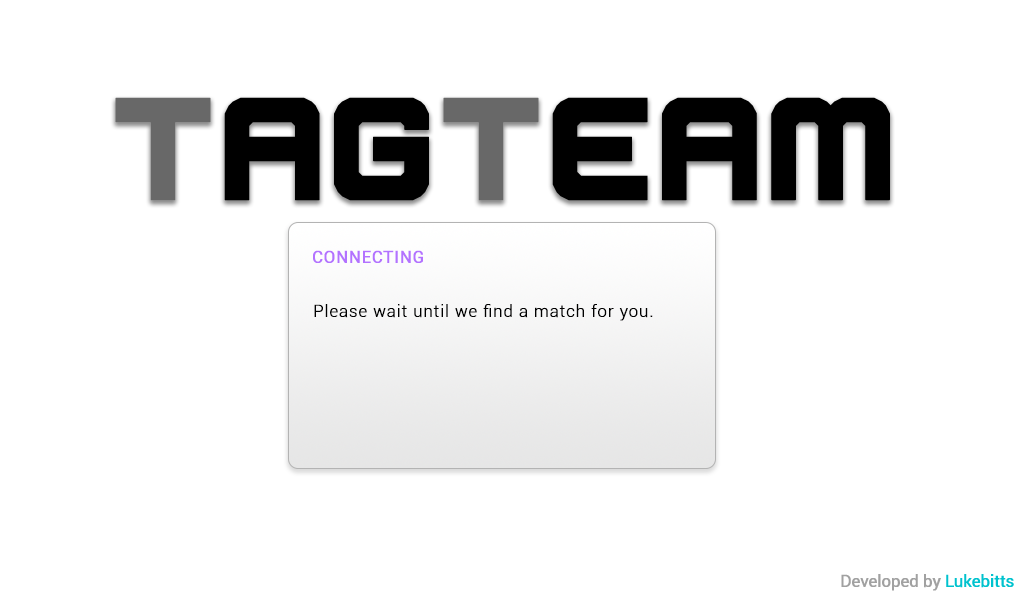
<style>
.page{position:relative;width:1024px;height:600px;background:#ffffff}
.page>*{position:absolute;margin:0}
.t1{font:125px "Scorpion";letter-spacing:0.035em;color:#000000;font-weight:bold}
.t2{font:125px "Scorpion";letter-spacing:0.035em;color:#686868;font-weight:bold}
.t3{font:16.7px "Roboto-Regular";letter-spacing:0.035em;color:#b372ff;font-weight:bold}
.t4{font:16.7px "Roboto-Light";letter-spacing:0.035em;color:#000000;font-weight:bold}
.t5{font:16.7px "Roboto-Regular";letter-spacing:-0.025em;color:#a1a1a1;font-weight:bold}
.t6{font:16.7px "Roboto-Regular";letter-spacing:-0.025em;color:#00c2ce;font-weight:bold}
</style>
<div class="page">
<p class="t1" style="left:115px;top:97px;width:775px;height:104px"><span class="t2">T</span>ag<span class="t2">T</span>eam</p>
<p class="t3" style="left:313px;top:250px;width:110px;height:13px">CONNECTING</p>
<p class="t4" style="left:314px;top:304px;width:339px;height:17px">Please wait until we find a match for you.</p>
<p class="t5" style="left:841px;top:574px;width:173px;height:17px">Developed by <span class="t6">Lukebitts</span></p>
</div>
